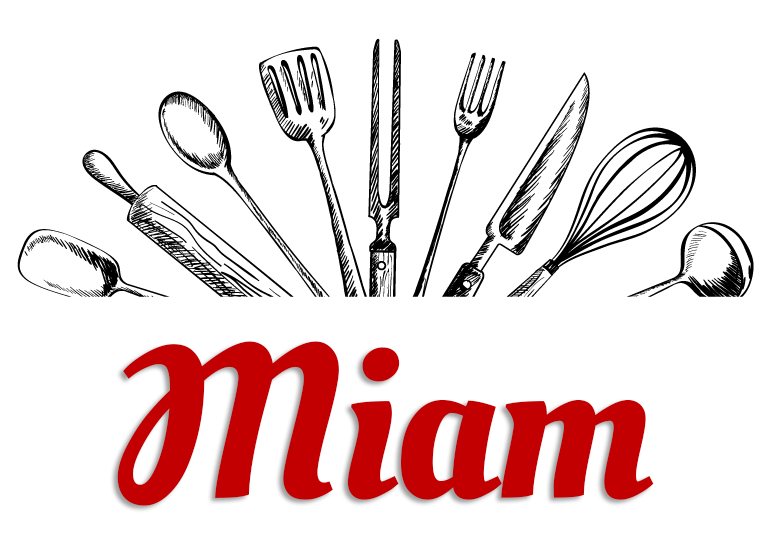
<style>
.page{position:relative;width:770px;height:550px;background:#ffffff}
.page>*{position:absolute;margin:0}
.t1{font:218.9px "OleoScriptSwashCaps-Regular";letter-spacing:-0.025em;color:#c20002}
</style>
<div class="page">
<p class="t1" style="left:117px;top:341px;width:537px;height:165px">Miam</p>
</div>
